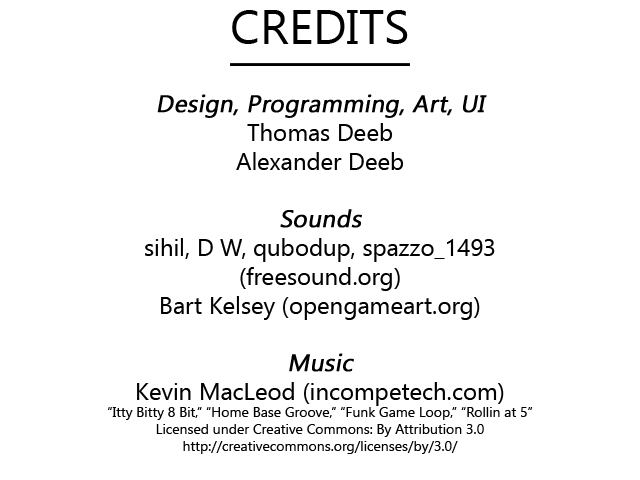
<style>
.page{position:relative;width:640px;height:480px;background:#ffffff}
.page>*{position:absolute;margin:0}
.t1{font:48px "SegoeUISymbol";color:#000000;text-decoration:underline}
.t2{font:14px "SegoeUISymbol";color:#000000}
.t3{font:24px "SegoeUISymbol";color:#000000;font-weight:bold;font-style:italic}
.t4{font:24px "SegoeUISymbol";color:#000000}
</style>
<div class="page">
<p class="t1" style="left:230px;top:10px;width:180px;height:56px">CREDITS</p>
<p class="t2" style="left:107px;top:94px;width:426px;height:360px;text-align:center"><span class="t3">Design, Programming, Art, UI<br></span><span class="t4">Thomas Deeb<br>Alexander Deeb<br><br></span><span class="t3">Sounds<br></span><span class="t4">sihil, D W, qubodup, spazzo_1493<br>(freesound.org)<br>Bart Kelsey (opengameart.org)<br><br></span><span class="t3">Music<br></span><span class="t4">Kevin MacLeod (incompetech.com)<br></span>“Itty Bitty 8 Bit,” “Home Base Groove,” “Funk Game Loop,” “Rollin at 5”<br>Licensed under Creative Commons: By Attribution 3.0<br>http://creativecommons.org/licenses/by/3.0/</p>
</div>
